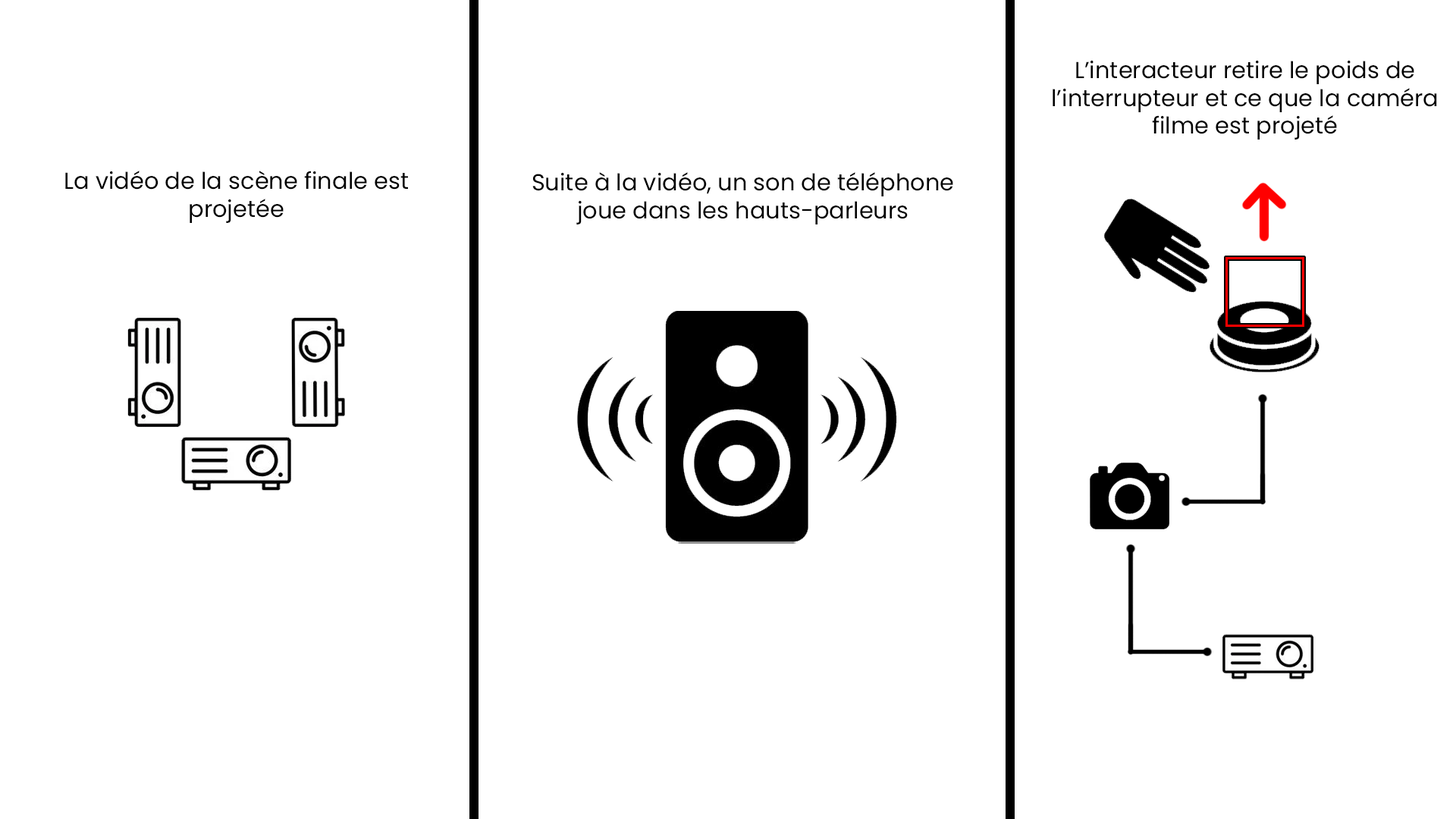
<style>
.page{position:relative;width:1456px;height:819px;background:#ffffff}
.page>*{position:absolute;margin:0}
.t1{font:23.1px "Poppins-Regular";color:#000000}
</style>
<div class="page">
<p class="t1" style="left:1053px;top:60px;width:384px;height:80px;text-align:center">L’interacteur retire le poids de<br>l’interrupteur et ce que la caméra<br>filme est projeté</p>
<p class="t1" style="left:65px;top:171px;width:343px;height:52px;text-align:center">La vidéo de la scène finale est<br>projetée</p>
<p class="t1" style="left:532px;top:172px;width:421px;height:52px;text-align:center">Suite à la vidéo, un son de téléphone<br>joue dans les hauts-parleurs</p>
</div>
